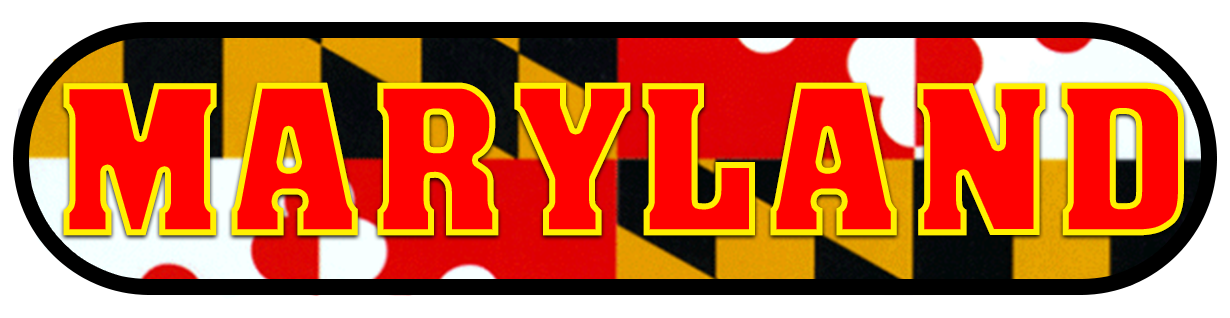
<style>
.page{position:relative;width:1230px;height:318px;background:#ff0000}
.page>*{position:absolute;margin:0}
.t1{font:200px "AcmeFont";color:#ff0000}
</style>
<div class="page">
<p class="t1" style="left:63px;top:82px;width:1121px;height:154px">MARYLAND</p>
</div>
